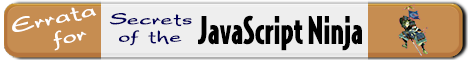
<style>
.page{position:relative;width:468px;height:60px;background:#eeeeee}
.page>*{position:absolute;margin:0}
.t1{font:17.9px "Adriattica";color:#ffffff;scale:1.48 1}
.t2{font:14.5px "Adriattica";color:#020058;scale:1.53 1}
.t3{font:36px "BodegaSans-Black";color:#000000;scale:0.88 1}
</style>
<div class="page">
<p class="t1" style="left:12px;top:7px;width:85px;height:44px;text-align:center;rotate:-12deg">Errata<br>  for</p>
<p class="t2" style="left:109px;top:13px;width:83px;height:33px;text-align:center">Secrets<br>of the</p>
<p class="t3" style="left:198px;top:15px;width:164px;height:36px">JavaScript Ninja</p>
</div>
